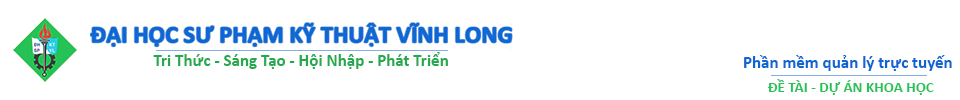
<style>
.page{position:relative;width:960px;height:100px;background:#ffffff}
.page>*{position:absolute;margin:0}
.t1{font:17px "Calibri-Bold";color:#24a94f}
.t2{font:17px "Calibri-Bold";color:#0e66d3}
.t3{font:15.1px "Calibri-Bold";color:#24c257}
</style>
<div class="page">
<p class="t1" style="left:153px;top:52px;width:295px;height:17px">Tri Thức - Sáng Tạo - Hội Nhập - Phát Triển</p>
<p class="t2" style="left:744px;top:55px;width:208px;height:16px">Phần mềm quản lý trực tuyến</p>
<p class="t3" style="left:768px;top:79px;width:166px;height:16px">ĐỀ TÀI - DỰ ÁN KHOA HỌC</p>
</div>
